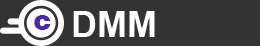
<style>
.page{position:relative;width:260px;height:46px;background:#333333}
.page>*{position:absolute;margin:0}
.t1{font:36px "Arial-BoldMT";color:#ffffff}
</style>
<div class="page">
<p class="t1" style="left:73px;top:11px;width:82px;height:26px">DMM</p>
</div>
